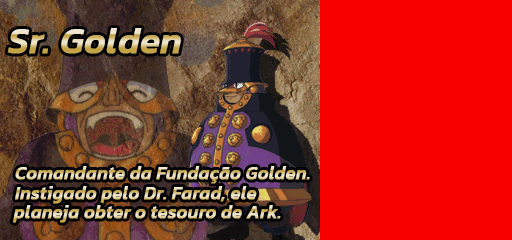
<style>
.page{position:relative;width:512px;height:240px;background:#f80000}
.page>*{position:absolute;margin:0}
.t1{font:36px "Kanit-MediumItalic";font-weight:bold}
.t2{font:18px "Kanit-MediumItalic";font-weight:bold}
</style>
<div class="page">
<p class="t1" style="left:7px;top:28px;width:174px;height:26px">Sr. Golden</p>
<p class="t2" style="left:15px;top:166px;width:295px;height:18px">Comandante da Fundação Golden.</p>
<p class="t2" style="left:15px;top:186px;width:242px;height:18px">Instigado pelo Dr. Farad, ele</p>
<p class="t2" style="left:12px;top:205px;width:269px;height:18px">planeja obter o tesouro de Ark.</p>
</div>
